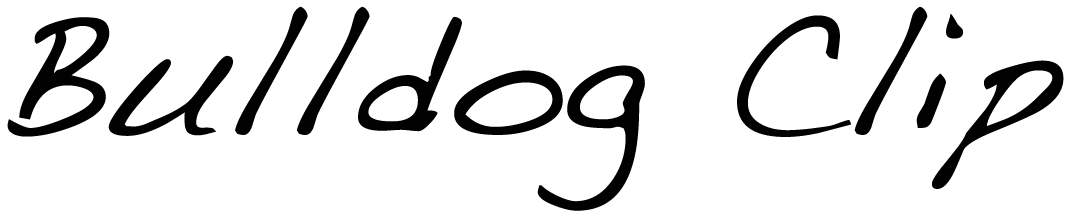
<style>
.page{position:relative;width:1073px;height:215px;background:#ffffff}
.page>*{position:absolute;margin:0}
.t1{font:183px "Handwriting-Dakota";color:#010101}
</style>
<div class="page">
<p class="t1" style="left:7px;top:6px;width:1057px;height:205px">Bulldog Clip</p>
</div>
